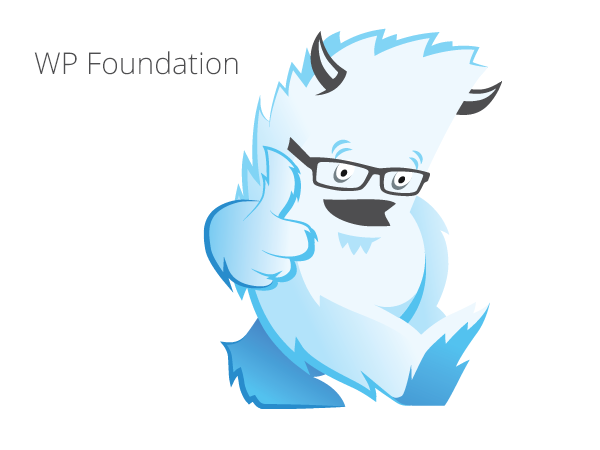
<style>
.page{position:relative;width:600px;height:450px;background:#ffffff}
.page>*{position:absolute;margin:0}
.t1{font:30px "OpenSans-Light";color:#4e4e50}
</style>
<div class="page">
<p class="t1" style="left:34px;top:51px;width:204px;height:24px">WP Foundation</p>
</div>
